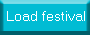
<style>
.page{position:relative;width:90px;height:35px;background:#00bcd4}
.page>*{position:absolute;margin:0}
.t1{font:14px "MicrosoftSansSerif";color:#ffffff}
</style>
<div class="page">
<p class="t1" style="left:7px;top:11px;width:78px;height:10px">Load festival</p>
</div>
